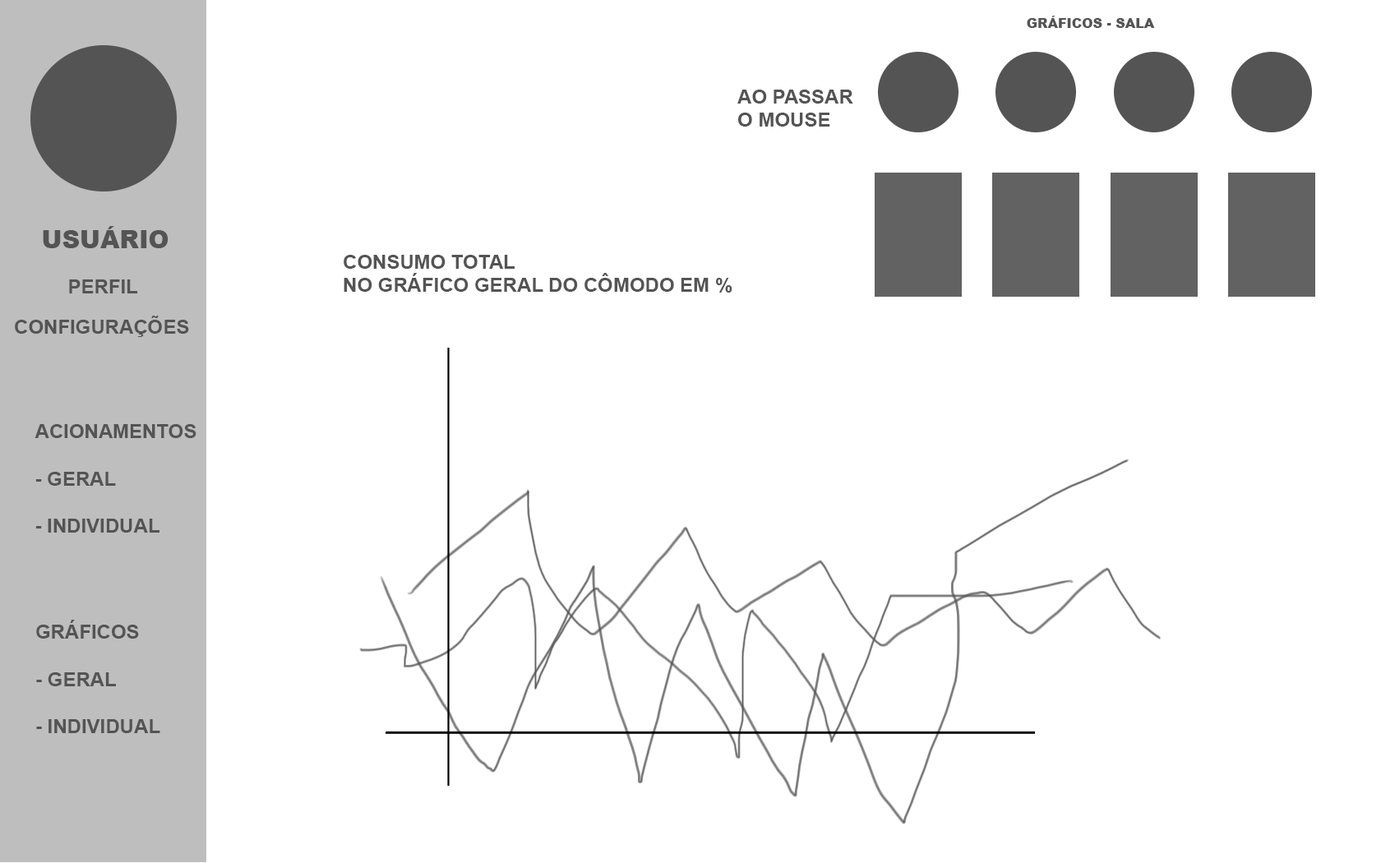
<style>
.page{position:relative;width:1381px;height:863px;background:#ffffff}
.page>*{position:absolute;margin:0}
.t1{font:13.2px "Arial-Black";color:#545454;text-transform:uppercase}
.t2{font:19.7px "Arial-BoldMT";color:#545454;text-transform:uppercase}
.t3{font:24.7px "Arial-Black";color:#545454;text-transform:uppercase}
</style>
<div class="page">
<p class="t1" style="left:1027px;top:16px;width:128px;height:12px">Gráficos - Sala</p>
<p class="t2" style="left:737px;top:90px;width:116px;height:37px">Ao passar <br>o mouse</p>
<p class="t3" style="left:43px;top:226px;width:126px;height:22px">Usuário</p>
<p class="t2" style="left:344px;top:255px;width:389px;height:38px">consumo total <br>no gráfico geral do CÔMODO em %</p>
<p class="t2" style="left:69px;top:280px;width:68px;height:14px">Perfil</p>
<p class="t2" style="left:15px;top:316px;width:174px;height:21px">Configurações</p>
<p class="t2" style="left:35px;top:424px;width:162px;height:109px">Acionamentos<br><br>- GERAL<br><br>- INDIVIDUAL</p>
<p class="t2" style="left:36px;top:620px;width:124px;height:113px">Gráficos<br><br>- GERAL<br><br>- INDIVIDUAL</p>
</div>
